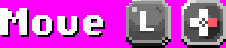
<style>
.page{position:relative;width:226px;height:48px;background:#ff00ff}
.page>*{position:absolute;margin:0}
.t1{font:39px "FirstFont-Bold";color:#ffffff}
.t2{font:39px "FirstFont-Bold"}
.t3{font:28px "FirstFont-Bold";letter-spacing:-0.01em;color:#ffffff}
</style>
<div class="page">
<p class="t1" style="left:0px;top:8px;width:103px;height:27px">Move</p>
<p class="t2" style="left:2px;top:10px;width:103px;height:27px">Move</p>
<p class="t3" style="left:140px;top:13px;width:14px;height:20px">L</p>
<p class="t3" style="left:140px;top:11px;width:14px;height:20px">L</p>
</div>
